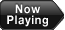
<style>
.page{position:relative;width:65px;height:30px}
.page>*{position:absolute;margin:0}
.t1{font:12.1px/11px "HelveticaNeue-Bold";letter-spacing:0.06em;color:#ffffff;scale:0.91 1}
</style>
<div class="page">
<p class="t1" style="left:7px;top:4px;width:41px;height:23px;text-align:center">Now<br>Playing</p>
</div>
